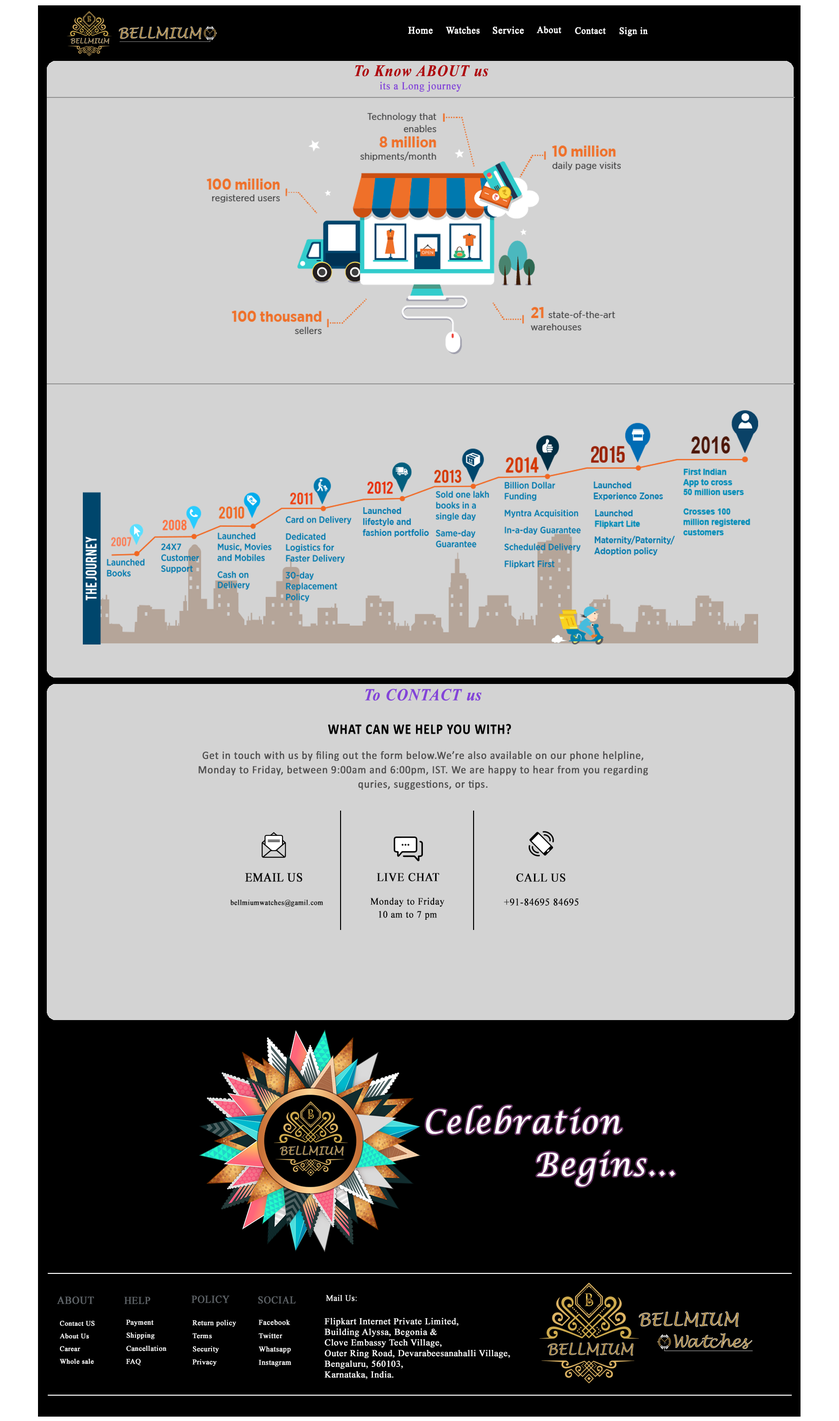
<style>
.page{position:relative;width:839px;height:1421px;background:#d3d3d3}
.page>*{position:absolute;margin:0}
.t1{font:9.8px "TimesNewRomanPSMT";letter-spacing:0.03em;color:#ffffff;font-weight:bold;scale:0.95 1}
.t2{font:9.8px "TimesNewRomanPSMT";letter-spacing:0.03em;color:#ffffff;font-weight:bold;scale:0.93 1}
.t3{font:9.5px "TimesNewRomanPSMT";letter-spacing:0.03em;color:#ffffff;font-weight:bold;scale:0.93 1}
.t4{font:15.8px "TimesNewRomanPS-BoldItalicMT";letter-spacing:0.03em;color:#ae090f;font-weight:bold;scale:0.91 1}
.t5{font:10.7px "TimesNewRomanPSMT";letter-spacing:0.03em;color:#8343d8;font-weight:bold;scale:0.92 1}
.t6{font:16.7px "TimesNewRomanPS-BoldItalicMT";letter-spacing:0.03em;color:#8343d8;font-weight:bold;scale:0.91 1}
.t7{font:14.6px "Calibri-Bold";letter-spacing:0.03em;color:#000000;font-weight:bold;scale:0.84 1}
.t8{font:11.2px/14.4px "Calibri";letter-spacing:0.03em;color:#515050;font-weight:bold;scale:0.93 1}
.t9{font:11.2px "Calibri";letter-spacing:0.03em;color:#515050;font-weight:bold;scale:0.93 1}
.t10{font:12.4px "TimesNewRomanPSMT";letter-spacing:0.03em;color:#060606;font-weight:bold;scale:0.91 1}
.t11{font:12px "TimesNewRomanPSMT";letter-spacing:0.03em;color:#060606;font-weight:bold;scale:0.93 1}
.t12{font:7.4px "TimesNewRomanPSMT";letter-spacing:0.03em;color:#060606;font-weight:bold;scale:0.93 1}
.t13{font:9.8px/13px "TimesNewRomanPSMT";letter-spacing:0.03em;color:#060606;font-weight:bold;scale:0.94 1}
.t14{font:10.3px "TimesNewRomanPSMT";letter-spacing:0.03em;color:#060606;font-weight:bold;scale:0.92 1}
.t15{font:32.1px/42.6px "LucidaCalligraphy-Italic";letter-spacing:0.03em;color:#ffffff;font-weight:bold;scale:0.93 1}
.t16{font:10.7px "TimesNewRomanPSMT";letter-spacing:0.03em;color:#5e6367;font-weight:bold;scale:0.93 1}
.t17{font:10.5px "TimesNewRomanPSMT";letter-spacing:0.03em;color:#5e6367;font-weight:bold;scale:0.93 1}
.t18{font:10.7px "TimesNewRomanPSMT";letter-spacing:0.03em;color:#5e6367;font-weight:bold;scale:0.91 1}
.t19{font:8.1px "TimesNewRomanPSMT";letter-spacing:0.03em;color:#ffffff;font-weight:bold}
.t20{font:6.8px/12.7px "TimesNewRomanPSMT";letter-spacing:0.03em;color:#ffffff;font-weight:bold}
.t21{font:7px/13.1px "TimesNewRomanPSMT";letter-spacing:0.03em;color:#ffffff;font-weight:bold}
.t22{font:7.2px/13.4px "TimesNewRomanPSMT";letter-spacing:0.03em;color:#ffffff;font-weight:bold}
.t23{font:8.9px "TimesNewRomanPSMT";letter-spacing:0.03em;color:#fefefe;font-weight:bold}
</style>
<div class="page">
<p class="t1" style="left:408px;top:27px;width:25px;height:7px">Home</p>
<p class="t2" style="left:446px;top:26px;width:34px;height:8px">Watches</p>
<p class="t1" style="left:493px;top:26px;width:31px;height:8px">Service</p>
<p class="t3" style="left:536px;top:26px;width:25px;height:8px">About</p>
<p class="t3" style="left:575px;top:27px;width:31px;height:7px">Contact</p>
<p class="t3" style="left:619px;top:27px;width:29px;height:10px">Sign in</p>
<p class="t4" style="left:355px;top:65px;width:133px;height:11px">To Know ABOUT us</p>
<p class="t5" style="left:380px;top:82px;width:81px;height:10px">its a Long journey</p>
<p class="t6" style="left:365px;top:689px;width:116px;height:12px">To CONTACT us</p>
<p class="t7" style="left:328px;top:724px;width:183px;height:10px">WHAT CAN WE HELP YOU WITH?</p>
<p class="t8" style="left:198px;top:751px;width:450px;height:39px;text-align:center">Get in touch with us by filing out the form below.We’re also available on our phone helpline,<br>Monday to Friday, between 9:00am and 6:00pm, IST. We are happy to hear from you regarding<br>quries, suggestions, or tips<span class="t9">.</span></p>
<p class="t10" style="left:245px;top:873px;width:58px;height:9px">EMAIL US</p>
<p class="t11" style="left:377px;top:873px;width:62px;height:8px">LIVE CHAT</p>
<p class="t11" style="left:516px;top:874px;width:50px;height:8px">CALL US</p>
<p class="t12" style="left:230px;top:900px;width:94px;height:7px">bellmiumwatches@gamil.com</p>
<p class="t13" style="left:370px;top:897px;width:74px;height:23px;text-align:center">Monday to Friday<br>10 am to 7 pm</p>
<p class="t14" style="left:504px;top:898px;width:75px;height:8px">+91-84695 84695</p>
<p class="t15" style="left:426px;top:1106px;width:249px;height:81px">Celebration<br>        Begins...</p>
<p class="t16" style="left:57px;top:1297px;width:37px;height:7px">ABOUT</p>
<p class="t17" style="left:124px;top:1297px;width:27px;height:7px">HELP</p>
<p class="t18" style="left:191px;top:1296px;width:38px;height:7px">POLICY</p>
<p class="t17" style="left:258px;top:1297px;width:38px;height:7px">SOCIAL</p>
<p class="t19" style="left:326px;top:1295px;width:31px;height:6px">Mail Us:</p>
<p class="t20" style="left:59px;top:1321px;width:36px;height:43px">Contact US<br>About Us<br>Carear<br>Whole sale</p>
<p class="t21" style="left:126px;top:1320px;width:41px;height:46px">Payment<br>Shipping<br>Cancellation<br>FAQ</p>
<p class="t21" style="left:192px;top:1320px;width:44px;height:46px">Return policy<br>Terms<br>Security<br>Privacy</p>
<p class="t22" style="left:259px;top:1320px;width:32px;height:47px">Facebook<br>Twitter<br>Whatsapp<br>Instagram</p>
<p class="t23" style="left:324px;top:1318px;width:186px;height:61px">Flipkart Internet Private Limited,<br>Building Alyssa, Begonia &amp;<br>Clove Embassy Tech Village,<br>Outer Ring Road, Devarabeesanahalli Village,<br>Bengaluru, 560103,<br>Karnataka, India.</p>
</div>
